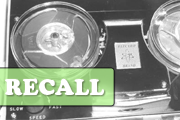
<style>
.page{position:relative;width:180px;height:120px}
.page>*{position:absolute;margin:0}
.t1{font:22px "CooperBlackStd";color:#ffffff}
</style>
<div class="page">
<p class="t1" style="left:5px;top:78px;width:99px;height:18px">RECALL</p>
</div>
